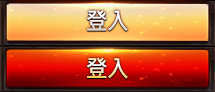
<style>
.page{position:relative;width:215px;height:92px}
.page>*{position:absolute;margin:0}
.t1{font:23.7px "MicrosoftJhengHeiBold";letter-spacing:-0.05em;color:#ffffff;scale:0.94 1}
.t2{font:23.7px "MicrosoftJhengHeiBold";letter-spacing:-0.05em;scale:0.94 1}
</style>
<div class="page">
<p class="t1" style="left:87px;top:10px;width:41px;height:21px">登入</p>
<p class="t2" style="left:87px;top:57px;width:41px;height:22px">登入</p>
</div>
